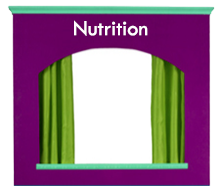
<style>
.page{position:relative;width:221px;height:186px;background:#ffffff}
.page>*{position:absolute;margin:0}
.t1{font:22.5px "TwCenMT-Regular";color:#ffffff}
</style>
<div class="page">
<p class="t1" style="left:74px;top:20px;width:74px;height:16px">Nutrition</p>
</div>
